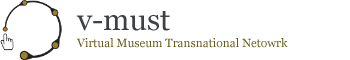
<style>
.page{position:relative;width:350px;height:60px;background:#ffffff}
.page>*{position:absolute;margin:0}
.t1{font:30px "Georgia";color:#3e4144}
.t2{font:12px "Georgia";letter-spacing:-0.005em;color:#6a5a1a}
</style>
<div class="page">
<p class="t1" style="left:76px;top:11px;width:94px;height:20px">v-must</p>
<p class="t2" style="left:76px;top:38px;width:212px;height:10px">Virtual Museum Transnational Netowrk</p>
</div>
